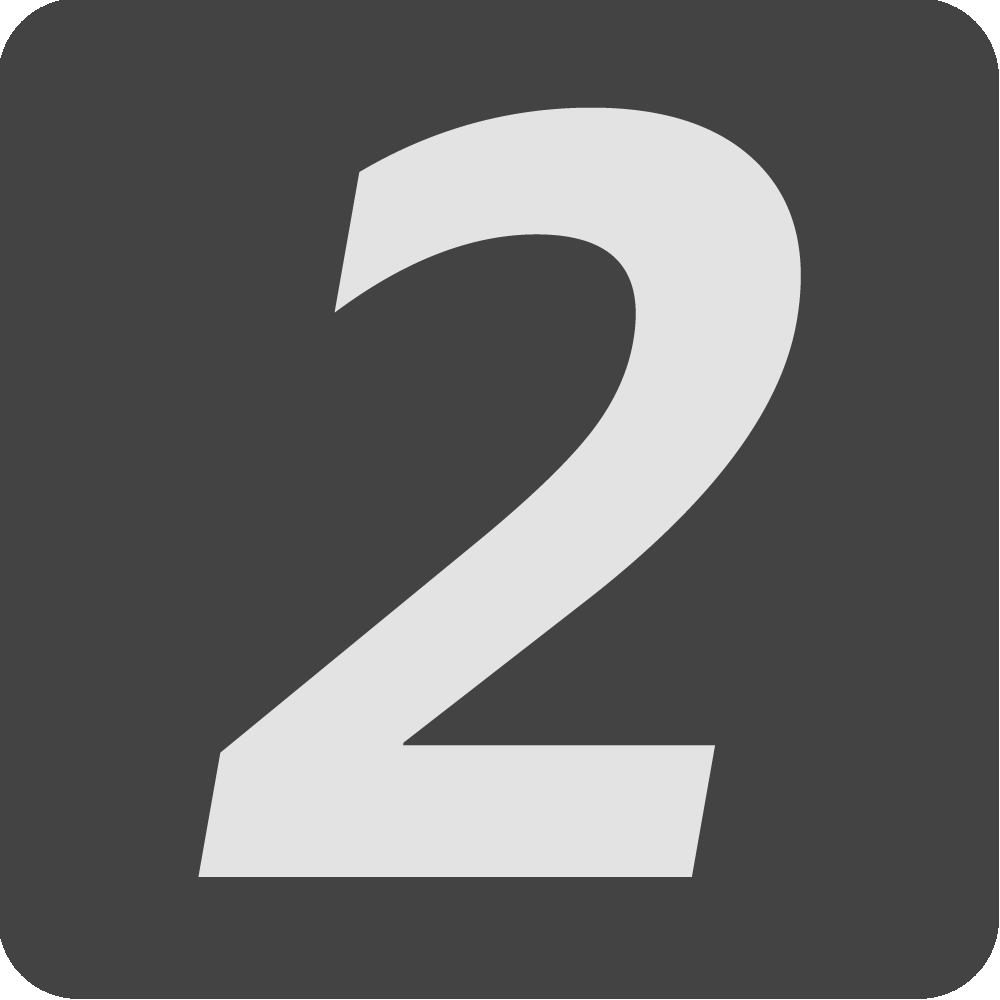
<style>
.page{position:relative;width:1000px;height:1000px;background:#434343}
.page>*{position:absolute;margin:0}
.t1{font:1000px "MicrosoftYaHei-Bold";color:#e3e3e3;text-transform:uppercase;font-style:italic}
</style>
<div class="page">
<p class="t1" style="left:198px;top:107px;width:603px;height:770px">2</p>
</div>
